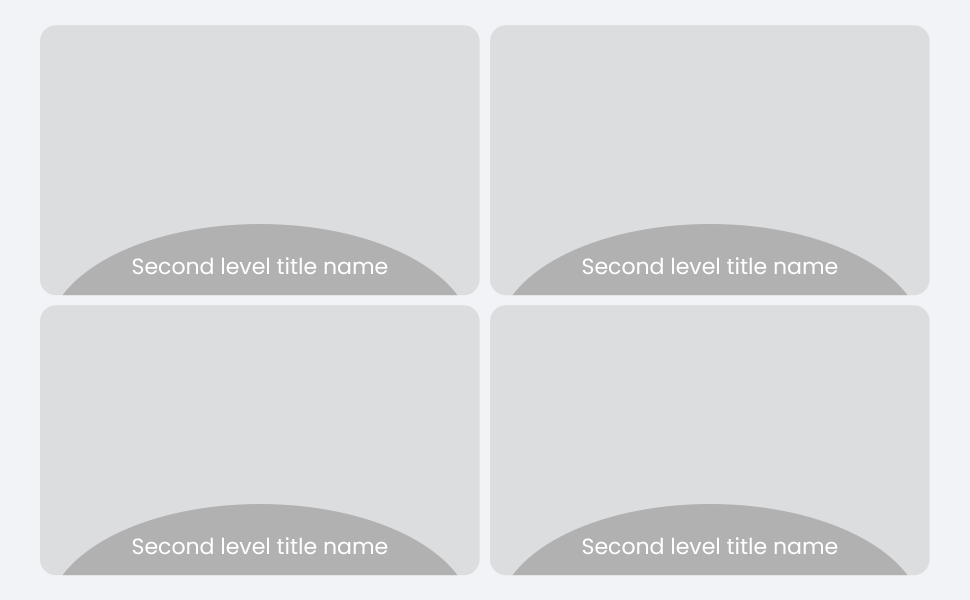
<style>
.page{position:relative;width:970px;height:600px;background:#dcdddf}
.page>*{position:absolute;margin:0}
.t1{font:22px "Poppins-Regular";color:#ffffff}
</style>
<div class="page">
<p class="t1" style="left:132px;top:257px;width:256px;height:18px">Second level title name</p>
<p class="t1" style="left:582px;top:257px;width:256px;height:18px">Second level title name</p>
<p class="t1" style="left:132px;top:537px;width:256px;height:18px">Second level title name</p>
<p class="t1" style="left:582px;top:537px;width:256px;height:18px">Second level title name</p>
</div>
